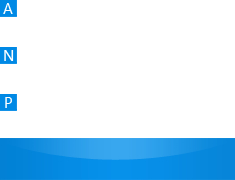
<style>
.page{position:relative;width:235px;height:180px;background:#ffffff}
.page>*{position:absolute;margin:0}
.t1{font:14px "MicrosoftYaHei";color:#feffff;text-transform:uppercase}
</style>
<div class="page">
<p class="t1" style="left:3px;top:3px;width:10px;height:11px">A</p>
<p class="t1" style="left:4px;top:50px;width:10px;height:11px">N</p>
<p class="t1" style="left:5px;top:97px;width:7px;height:11px">P</p>
</div>
